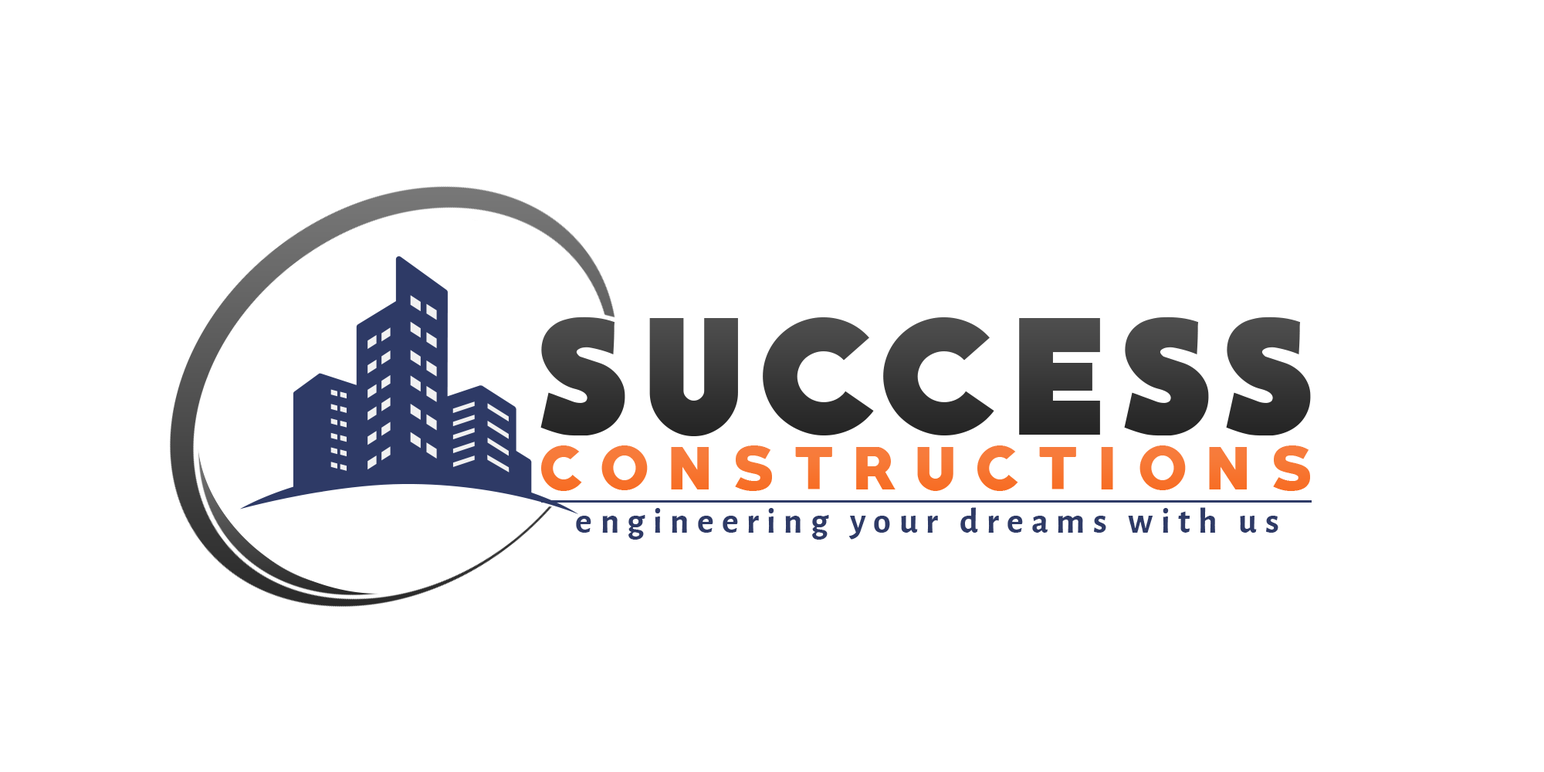
<style>
.page{position:relative;width:1544px;height:772px;background:#ffffff}
.page>*{position:absolute;margin:0}
.t1{font:160.9px "QUARTZO-Bold";letter-spacing:0.12em;color:#4b4b4b}
.t2{font:54.7px "PRIMETIME-Regular";letter-spacing:0.373em;color:#f77633}
.t3{font:35.4px "AlegreyaSans-Bold";letter-spacing:0.23em;color:#2e3a66}
</style>
<div class="page">
<p class="t1" style="left:541px;top:317px;width:770px;height:119px">SUCCESS</p>
<p class="t2" style="left:541px;top:446px;width:769px;height:45px">CONSTRUCTIONS</p>
<p class="t3" style="left:576px;top:507px;width:703px;height:33px">engineering your dreams with us</p>
</div>
